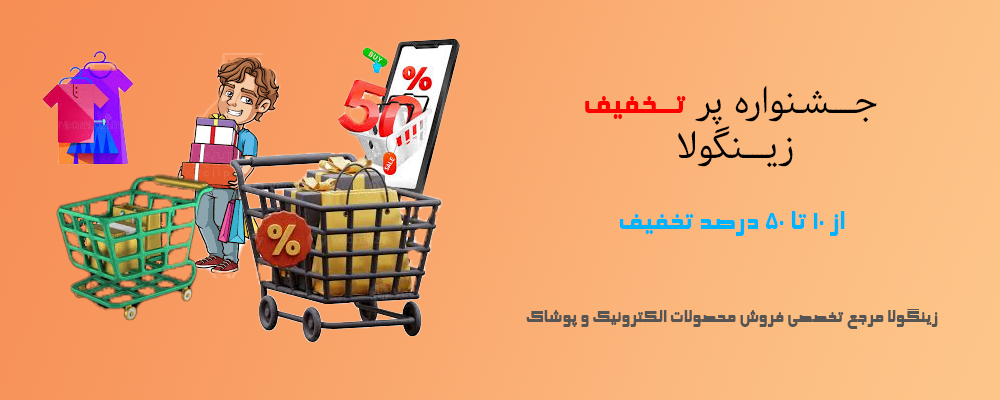
<style>
.page{position:relative;width:1000px;height:400px}
.page>*{position:absolute;margin:0}
.t1{font:37px "Gandom";color:#000000}
.t2{font:37px "BElham";color:#ff0000}
.t3{font:33px "BElham";color:#00b3fe}
.t4{font:21px "BElham";color:#555555}
</style>
<div class="page">
<p class="t1" style="left:585px;top:85px;width:292px;height:82px;text-align:center">جـــــشـنواره پر <span class="t2">تــخفیف <br></span>زیـــــنگولا</p>
<p class="t3" style="left:619px;top:211px;width:226px;height:25px">از 10 تا 50 درصد تخفیف</p>
<p class="t4" style="left:526px;top:309px;width:412px;height:20px">زینگولا مرجع تخصصی فروش محصولات الکترونیک و پوشاک</p>
</div>
